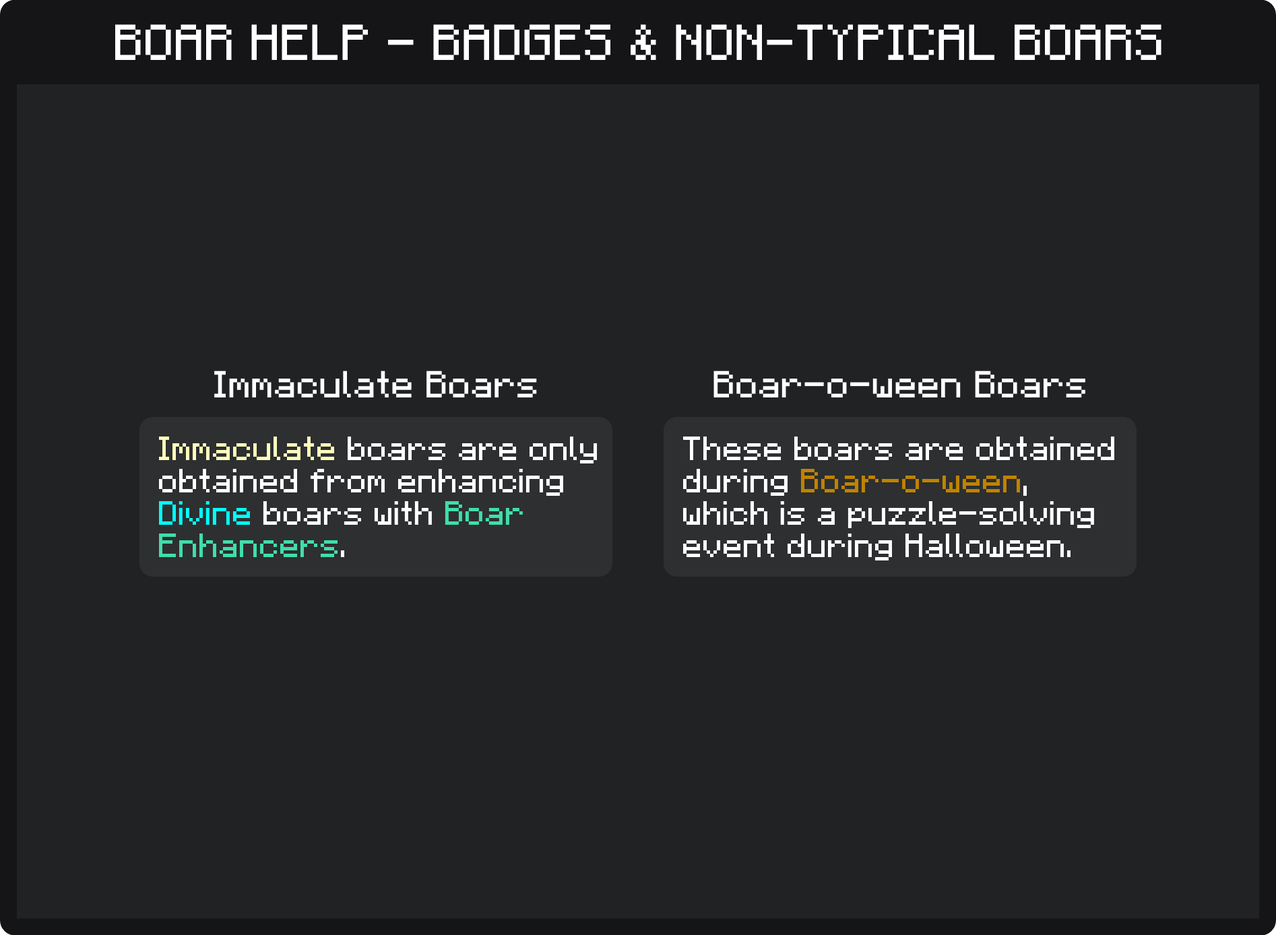
<style>
.page{position:relative;width:1276px;height:935px;background:#212224}
.page>*{position:absolute;margin:0}
.t1{font:40.4px "F77-Minecraft";color:#ffffff}
.t2{font:30.3px "F77-Minecraft";color:#ffffff}
.t3{font:26.9px "F77-Minecraft";color:#ffffff}
.t4{font:26.9px "F77-Minecraft";color:#fffebb}
.t5{font:26.9px "F77-Minecraft";color:#00fffb}
.t6{font:26.9px "F77-Minecraft";color:#40dea9}
.t7{font:26.9px "F77-Minecraft";color:#c08300}
</style>
<div class="page">
<p class="t1" style="left:115px;top:24px;width:1046px;height:36px">BOAR HELP - BADGES &amp; NON-TYPICAL BOARS</p>
<p class="t2" style="left:214px;top:370px;width:323px;height:27px">Immaculate Boars</p>
<p class="t2" style="left:713px;top:370px;width:372px;height:27px">Boar-o-ween Boars</p>
<p class="t3" style="left:159px;top:436px;width:438px;height:121px"><span class="t4">Immaculate </span>boars are only<br>obtained from enhancing<br><span class="t5">Divine </span>boars with <span class="t6">Boar<br>Enhancers</span>.</p>
<p class="t3" style="left:683px;top:436px;width:431px;height:124px">These boars are obtained<br>during <span class="t7">Boar-o-ween</span>,<br>which is a puzzle-solving<br>event during Halloween.</p>
</div>
